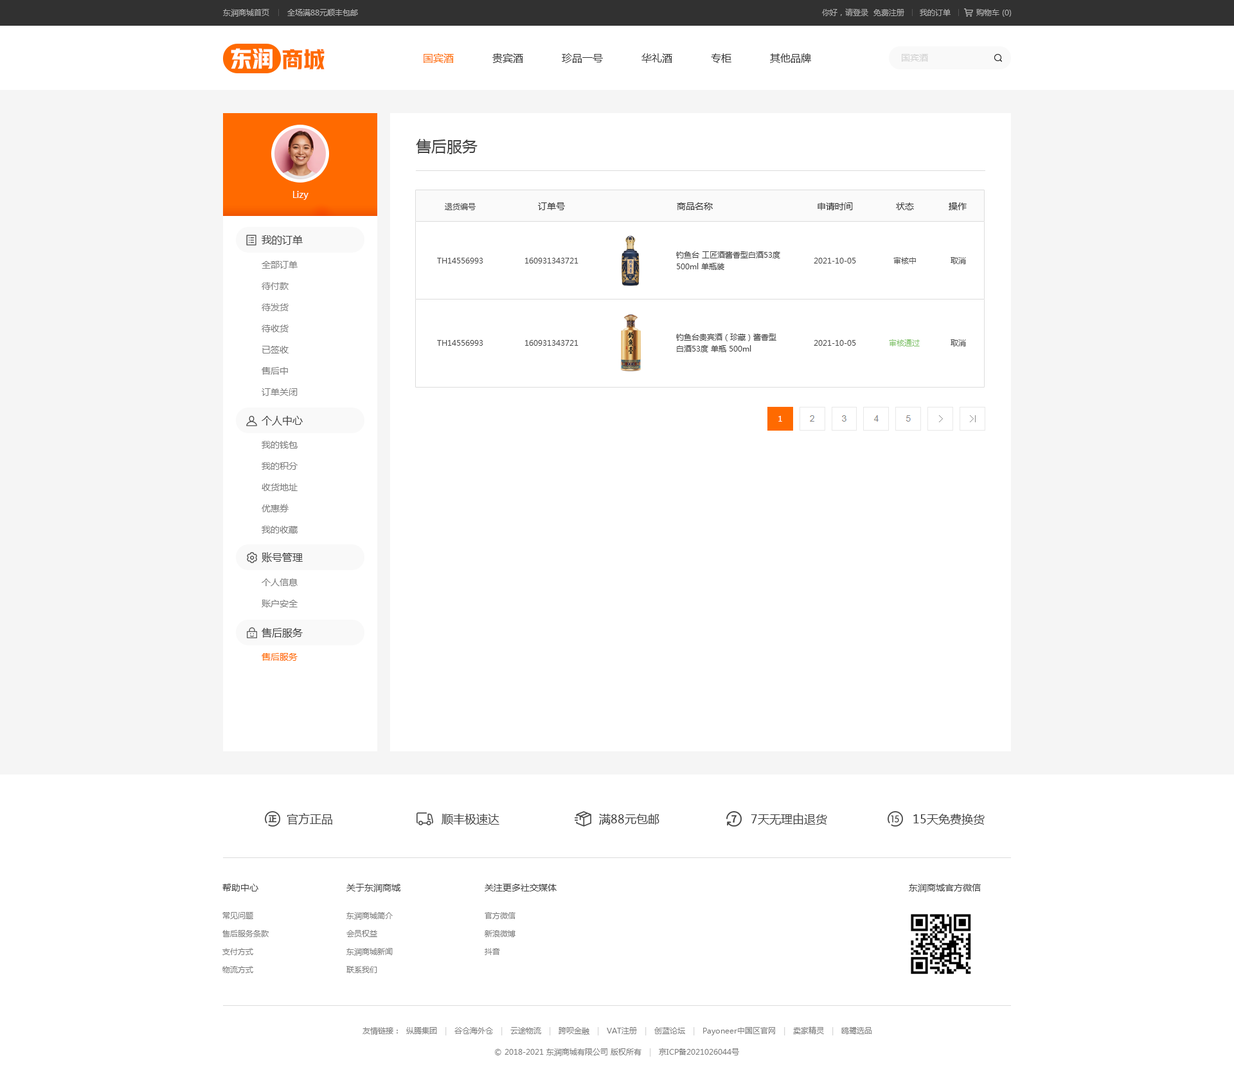
<style>
.page{position:relative;width:1234px;height:1083px;background:#ffffff}
.page>*{position:absolute;margin:0}
.t1{font:7.7px "MicrosoftYaHei";color:#b0b0b0}
.t2{font:7.7px "MicrosoftYaHei";color:#acacac}
.t3{font:21.9px "HYYakuHei-HEW";color:#ffffff}
.t4{font:21.9px "HYYakuHei-HEW";color:#ff6a00}
.t5{font:10.3px "MicrosoftYaHei";color:#333333}
.t6{font:10.3px "MicrosoftYaHei";color:#ff6a00}
.t7{font:9px "MicrosoftYaHei";color:#d2d2d2}
.t8{font:15.4px "MicrosoftYaHei";color:#434343}
.t9{font:9px "MicrosoftYaHei";color:#ffffff}
.t10{font:7.7px "MicrosoftYaHei";color:#4b4b4b}
.t11{font:9px "MicrosoftYaHei";color:#313131}
.t12{font:10.3px "MicrosoftYaHei";color:#434343}
.t13{font:7.7px/11.6px "MicrosoftYaHei";color:#434343}
.t14{font:9px/21.2px "MicrosoftYaHei";color:#7d7d7d}
.t15{font:7.7px "MicrosoftYaHei";color:#80c269}
.t16{font:7.7px "MicrosoftYaHei";color:#ffffff;text-transform:uppercase}
.t17{font:9px "MicrosoftYaHei";color:#ff6a00}
.t18{font:11.6px "MicrosoftYaHei";color:#434343}
.t19{font:9px "MicrosoftYaHei";color:#434343}
.t20{font:7.7px/18px "MicrosoftYaHei";color:#7d7d7d}
.t21{font:7.7px "MicrosoftYaHei";color:#7d7d7d}
.t22{font:7.7px "MicrosoftYaHei";color:#d2d2d2}
</style>
<div class="page">
<p class="t1" style="left:223px;top:9px;width:135px;height:8px">东润商城首页       全场满88元顺丰包邮</p>
<p class="t2" style="left:822px;top:8px;width:190px;height:9px">你好，请登录  免费注册      我的订单          购物车 (0)</p>
<p class="t3" style="left:231px;top:48px;width:42px;height:21px">东润</p>
<p class="t4" style="left:282px;top:49px;width:43px;height:20px">商城</p>
<p class="t5" style="left:424px;top:53px;width:387px;height:10px"><span class="t6">国宾酒</span>            贵宾酒            珍品一号            华礼酒            专柜            其他品牌</p>
<p class="t7" style="left:902px;top:54px;width:26px;height:8px">国宾酒</p>
<p class="t8" style="left:416px;top:139px;width:62px;height:15px">售后服务</p>
<p class="t9" style="left:293px;top:191px;width:16px;height:9px">Lizy</p>
<p class="t10" style="left:445px;top:203px;width:31px;height:7px">退货编号</p>
<p class="t11" style="left:538px;top:203px;width:27px;height:7px">订单号</p>
<p class="t11" style="left:677px;top:203px;width:36px;height:7px">商品名称</p>
<p class="t11" style="left:818px;top:203px;width:35px;height:7px">申请时间</p>
<p class="t11" style="left:896px;top:203px;width:18px;height:7px">状态</p>
<p class="t11" style="left:949px;top:203px;width:18px;height:7px">操作</p>
<p class="t12" style="left:262px;top:235px;width:41px;height:10px">我的订单</p>
<p class="t10" style="left:437px;top:258px;width:46px;height:6px">TH14556993</p>
<p class="t10" style="left:525px;top:258px;width:54px;height:6px">160931343721</p>
<p class="t13" style="left:676px;top:251px;width:104px;height:19px">钓鱼台 工匠酒酱香型白酒53度<br>500ml 单瓶装</p>
<p class="t10" style="left:814px;top:258px;width:42px;height:6px">2021-10-05</p>
<p class="t10" style="left:894px;top:257px;width:22px;height:7px">审核中</p>
<p class="t10" style="left:951px;top:257px;width:15px;height:7px">取消</p>
<p class="t14" style="left:262px;top:261px;width:36px;height:135px">全部订单<br>待付款<br>待发货<br>待收货<br>已签收<br>售后中<br>订单关闭</p>
<p class="t10" style="left:437px;top:340px;width:46px;height:6px">TH14556993</p>
<p class="t10" style="left:525px;top:340px;width:54px;height:6px">160931343721</p>
<p class="t13" style="left:676px;top:334px;width:101px;height:18px">钓鱼台贵宾酒（珍藏）酱香型<br>白酒53度 单瓶 500ml</p>
<p class="t10" style="left:814px;top:340px;width:42px;height:6px">2021-10-05</p>
<p class="t15" style="left:889px;top:339px;width:31px;height:7px">审核通过</p>
<p class="t10" style="left:951px;top:339px;width:15px;height:7px">取消</p>
<p class="t12" style="left:262px;top:416px;width:41px;height:10px">个人中心</p>
<p class="t16" style="left:779px;top:416px;width:3px;height:6px">1</p>
<p class="t14" style="left:262px;top:441px;width:36px;height:93px">我的钱包<br>我的积分<br>收货地址<br>优惠券<br>我的收藏</p>
<p class="t12" style="left:262px;top:552px;width:41px;height:10px">账号管理</p>
<p class="t14" style="left:262px;top:579px;width:36px;height:29px">个人信息<br>账户安全</p>
<p class="t12" style="left:262px;top:628px;width:41px;height:10px">售后服务</p>
<p class="t17" style="left:262px;top:653px;width:36px;height:8px">售后服务</p>
<p class="t18" style="left:287px;top:813px;width:45px;height:12px">官方正品</p>
<p class="t18" style="left:442px;top:814px;width:58px;height:11px">顺丰极速达</p>
<p class="t18" style="left:599px;top:814px;width:61px;height:11px">满88元包邮</p>
<p class="t18" style="left:751px;top:813px;width:76px;height:12px">7天无理由退货</p>
<p class="t18" style="left:914px;top:814px;width:71px;height:11px">15天免费换货</p>
<p class="t19" style="left:222px;top:884px;width:36px;height:8px">帮助中心</p>
<p class="t19" style="left:346px;top:884px;width:55px;height:8px">关于东润商城</p>
<p class="t19" style="left:485px;top:884px;width:72px;height:8px">关注更多社交媒体</p>
<p class="t19" style="left:909px;top:884px;width:72px;height:8px">东润商城官方微信</p>
<p class="t20" style="left:222px;top:912px;width:47px;height:61px">常见问题<br>售后服务条款<br>支付方式<br>物流方式</p>
<p class="t20" style="left:346px;top:912px;width:47px;height:61px">东润商城简介<br>会员权益<br>东润商城新闻<br>联系我们</p>
<p class="t20" style="left:485px;top:912px;width:31px;height:43px">官方微信<br>新浪微博<br>抖音</p>
<p class="t21" style="left:363px;top:1027px;width:509px;height:9px">友情链接：  纵腾集团   <span class="t22">|   </span>谷仓海外仓   <span class="t22">|   </span>云途物流   <span class="t22">|   </span>跨呗金融   <span class="t22">|   </span>VAT注册   <span class="t22">|   </span>创蓝论坛   <span class="t22">|   </span>Payoneer中国区官网   <span class="t22">|   </span>卖家精灵   <span class="t22">|   </span>鸥鹭选品</p>
<p class="t21" style="left:495px;top:1048px;width:244px;height:9px">© 2018-2021 东润商城有限公司 版权所有   <span class="t22">|   </span>京ICP备2021026044号</p>
</div>
